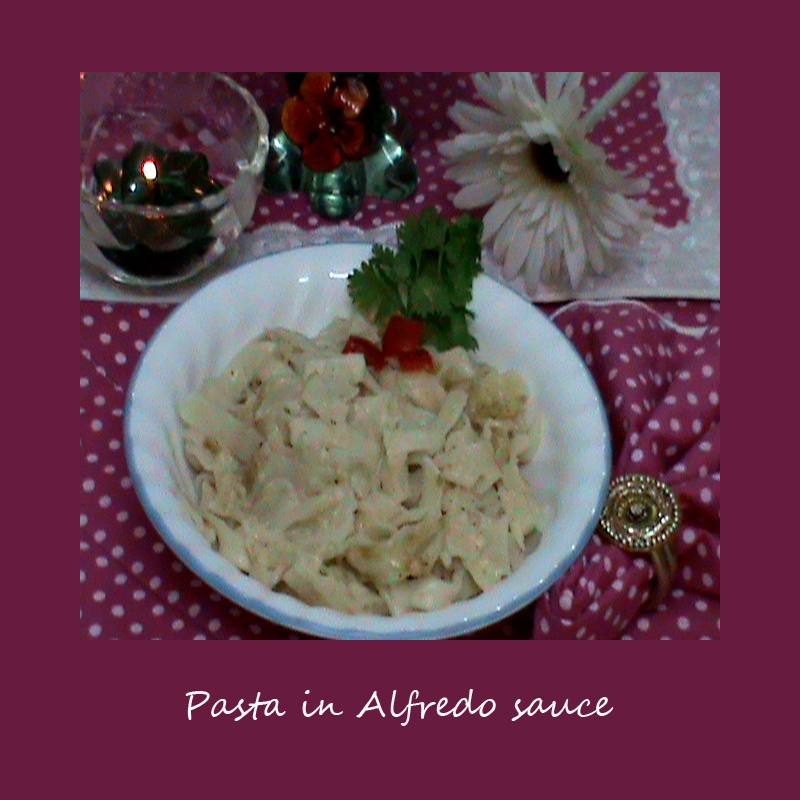
<style>
.page{position:relative;width:800px;height:800px;background:#671b3f}
.page>*{position:absolute;margin:0}
.t1{font:36px "SegoeScript";color:#fbf9f7}
</style>
<div class="page">
<p class="t1" style="left:185px;top:689px;width:429px;height:37px">Pasta in Alfredo sauce</p>
</div>
